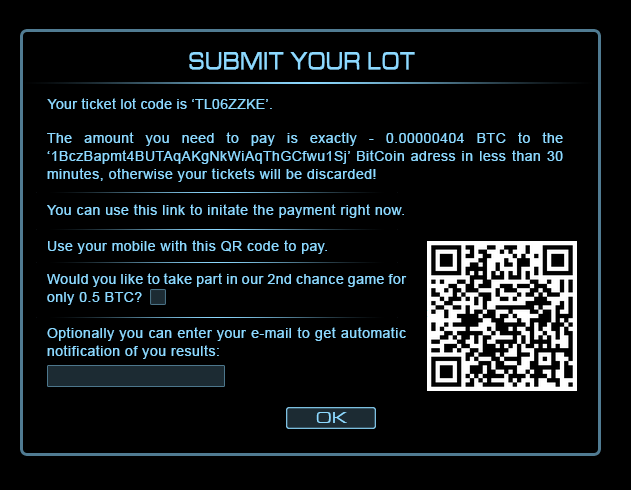
<style>
.page{position:relative;width:631px;height:490px;background:#000000}
.page>*{position:absolute;margin:0}
.t1{font:26px "MicrogrammaD-MediExte";letter-spacing:0.075em;color:#8dd9ff;font-weight:bold;scale:0.7 1}
.t2{font:14px "ArialMT";letter-spacing:0.025em;color:#8dd9ff}
.t3{font:14px/18px "ArialMT";letter-spacing:0.05em;color:#8dd9ff}
.t4{font:16px "MicrogrammaD-MediExte";letter-spacing:0.075em;color:#8dd9ff}
</style>
<div class="page">
<p class="t1" style="left:189px;top:52px;width:226px;height:18px">SUBMIT YOUR LOT</p>
<p class="t2" style="left:47px;top:98px;width:225px;height:11px">Your ticket lot code is ‘TL06ZZKE’.</p>
<p class="t3" style="left:47px;top:132px;width:516px;height:122px;text-align:justify">The amount you need to pay is exactly - 0.00000404 BTC to the ‘1BczBapmt4BUTAqAKgNkWiAqThGCfwu1Sj’ BitCoin adress in less than 30 minutes, otherwise your tickets will be discarded!<br><br>You can use this link to initate the payment right now.<br><br>Use your mobile with this QR code to pay.</p>
<p class="t3" style="left:47px;top:273px;width:360px;height:86px;text-align:justify">Would you like to take part in our 2nd chance game for only 0.5 BTC?<br><br>Optionally you can enter your e-mail to get automatic notification of you results:</p>
<p class="t4" style="left:316px;top:412px;width:31px;height:11px">OK</p>
</div>
